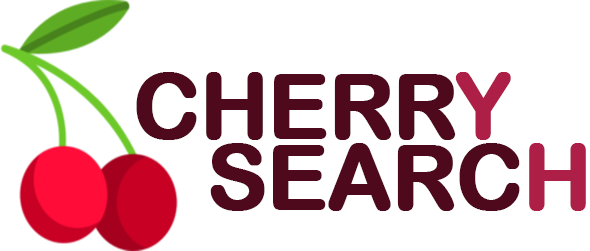
<style>
.page{position:relative;width:590px;height:251px;background:#ffffff}
.page>*{position:absolute;margin:0}
.t1{font:90px "ArialRoundedMTBold";letter-spacing:-0.025em;color:#4e091c;font-weight:bold}
.t2{font:90px "ArialRoundedMTBold";letter-spacing:-0.025em;color:#ad1f46;font-weight:bold}
</style>
<div class="page">
<p class="t1" style="left:136px;top:72px;width:375px;height:68px">CHERR<span class="t2">Y</span></p>
<p class="t1" style="left:210px;top:143px;width:376px;height:68px">SEARC<span class="t2">H</span></p>
</div>
